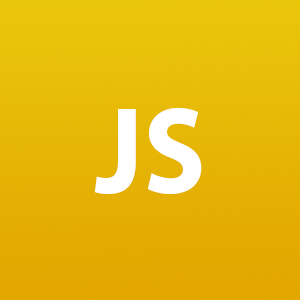
<style>
.page{position:relative;width:300px;height:300px}
.page>*{position:absolute;margin:0}
.t1{font:125px "MyriadPro-Bold";color:#ffffff;scale:0.93 1}
</style>
<div class="page">
<p class="t1" style="left:94px;top:107px;width:108px;height:88px">JS</p>
</div>
